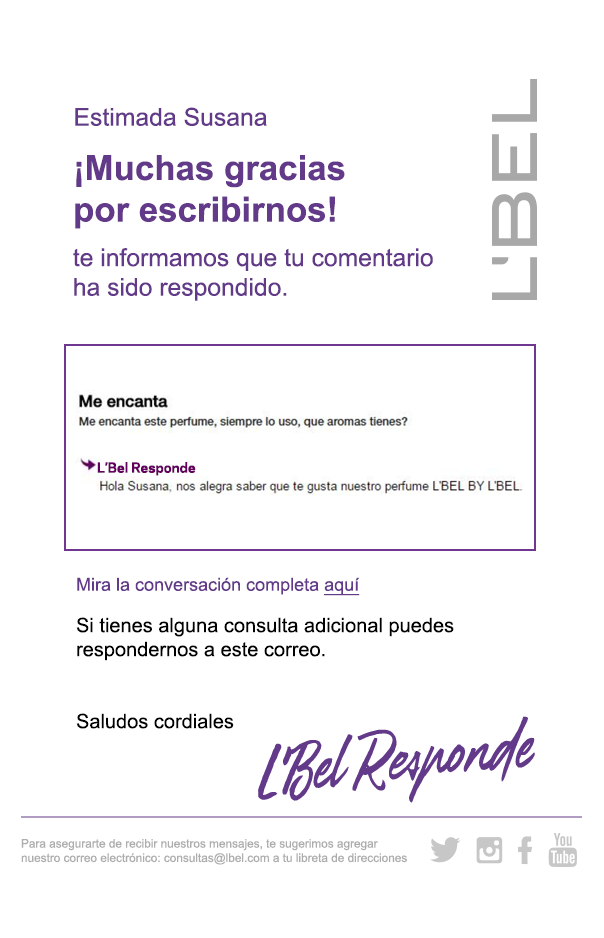
<style>
.page{position:relative;width:604px;height:938px;background:#ffffff}
.page>*{position:absolute;margin:0}
.t1{font:24.6px "ArialMT";color:#633a89}
.t2{font:34.7px "Arial-BoldMT";color:#633a89}
.t3{font:13.2px "Polaris-Bold";color:#64005f}
.t4{font:18px "ArialMT";color:#633a89}
.t5{font:18px "ArialMT";color:#633a89;text-decoration:underline}
.t6{font:20px "ArialMT";color:#000000}
.t7{font:11.9px "ArialMT";color:#aeadad}
</style>
<div class="page">
<p class="t1" style="left:75px;top:107px;width:192px;height:19px">Estimada Susana</p>
<p class="t2" style="left:75px;top:155px;width:270px;height:74px">¡Muchas gracias<br>por escribirnos!</p>
<p class="t1" style="left:73px;top:248px;width:360px;height:53px">te informamos que tu comentario ha sido respondido.</p>
<p class="t3" style="left:97px;top:462px;width:99px;height:14px">L’Bel Responde</p>
<p class="t4" style="left:77px;top:577px;width:283px;height:19px">Mira la conversación completa <span class="t5">aquí</span></p>
<p class="t6" style="left:76px;top:617px;width:378px;height:112px">Si tienes alguna consulta adicional puedes respondernos a este correo. <br><br><br>Saludos cordiales</p>
<p class="t7" style="left:21px;top:839px;width:386px;height:26px">Para asegurarte de recibir nuestros mensajes, te sugerimos agregar<br>nuestro correo electrónico: consultas@lbel.com a tu libreta de direcciones</p>
</div>
